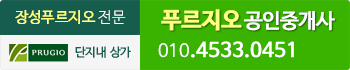
<style>
.page{position:relative;width:350px;height:70px;background:#3ab300}
.page>*{position:absolute;margin:0}
.t1{font:15px "NanumBarunGothicOTF";color:#ffff80}
.t2{font:15px "NanumBarunGothicOTFUltraLight";color:#ffffff}
.t3{font:20.2px "NanumBarunGothicOTF";letter-spacing:-0.025em;color:#ffffff;font-weight:bold}
.t4{font:22.5px "NanumBarunGothicOTFBold";letter-spacing:-0.025em;color:#ffff81;font-weight:bold}
.t5{font:19.5px "NanumBarunGothicOTF";color:#ffffff;font-weight:bold}
.t6{font:17.4px "NanumBarunGothicOTFUltraLight";color:#ffffff;font-weight:bold}
.t7{font:12px "NanumBarunGothicOTF";color:#165d4e}
</style>
<div class="page">
<p class="t1" style="left:15px;top:10px;width:111px;height:14px">장성푸르지오 <span class="t2">전문</span></p>
<p class="t3" style="left:161px;top:9px;width:174px;height:22px"><span class="t4">푸르지오 </span>공인중개사</p>
<p class="t5" style="left:158px;top:41px;width:136px;height:17px"><span class="t6">010</span>.4533.0451</p>
<p class="t7" style="left:75px;top:46px;width:56px;height:12px">단지내 상가</p>
</div>
